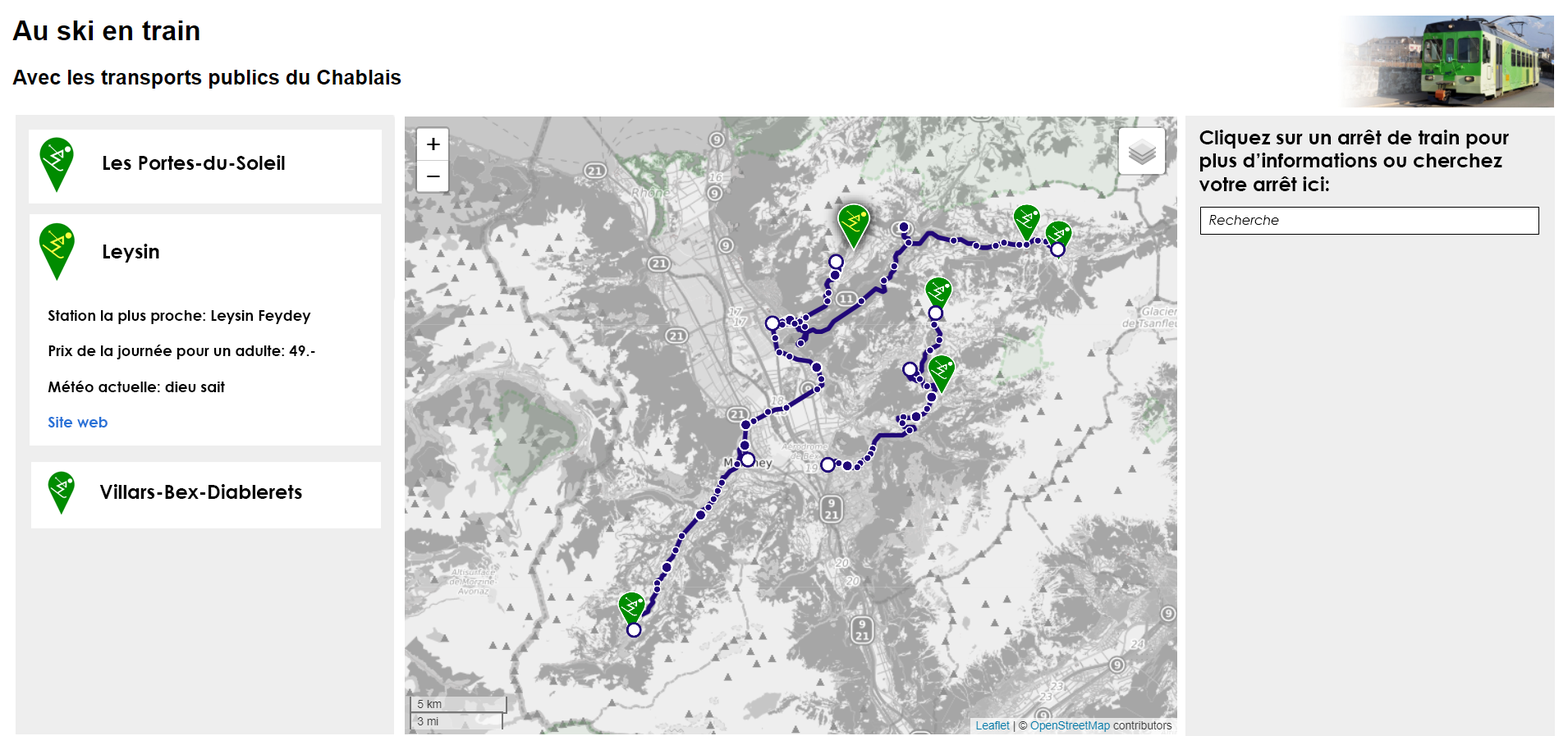
<style>
.page{position:relative;width:1568px;height:736px;background:#eeeeee}
.page>*{position:absolute;margin:0}
.t1{font:19.7px "CenturyGothic-Bold";color:#000000}
.t2{font:13.1px "CenturyGothic-Italic";color:#000000}
.t3{font:14.8px "CenturyGothic-Bold";color:#000000}
.t4{font:14.8px "CenturyGothic-Bold";color:#2872d7}
</style>
<div class="page">
<p class="t1" style="left:1199px;top:130px;width:310px;height:61px">Cliquez sur un arrêt de train pour plus d’informations ou cherchez votre arrêt ici:</p>
<p class="t1" style="left:103px;top:155px;width:182px;height:15px">Les Portes-du-Soleil</p>
<p class="t2" style="left:1209px;top:215px;width:70px;height:10px">Recherche</p>
<p class="t1" style="left:103px;top:244px;width:56px;height:19px">Leysin</p>
<p class="t3" style="left:48px;top:310px;width:267px;height:118px">Station la plus proche: Leysin Feydey<br><br>Prix de la journée pour un adulte: 49.-<br><br>Météo actuelle: dieu sait<br><br><span class="t4">Site web</span></p>
<p class="t1" style="left:99px;top:484px;width:203px;height:15px">Villars-Bex-Diablerets</p>
</div>
